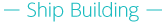
<style>
.page{position:relative;width:166px;height:22px;background:#ffffff}
.page>*{position:absolute;margin:0}
.t1{font:18px "UDShinGoPro-Light";color:#1dbcc0}
</style>
<div class="page">
<p class="t1" style="left:4px;top:2px;width:158px;height:20px">ー Ship Building ー</p>
</div>
